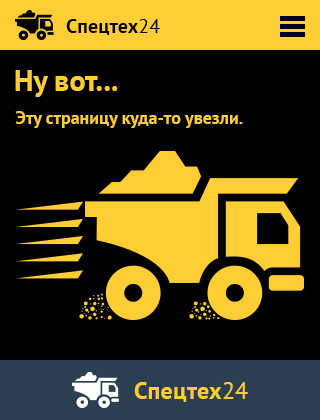
<style>
.page{position:relative;width:320px;height:420px;background:#000000}
.page>*{position:absolute;margin:0}
.t1{font:20px "PTSans-Bold";letter-spacing:0.01em;color:#000000}
.t2{font:20px "PTSans-Regular";letter-spacing:0.01em;color:#000000}
.t3{font:30px "PTSans-Bold";color:#ffcd34}
.t4{font:18px "PTSans-Bold";color:#ffcd34}
.t5{font:24px "PTSans-Bold";letter-spacing:0.01em;color:#ffcd34}
.t6{font:24px "PTSans-Regular";letter-spacing:0.01em;color:#ffcd34}
</style>
<div class="page">
<p class="t1" style="left:66px;top:19px;width:94px;height:16px">Спецтех<span class="t2">24</span></p>
<p class="t3" style="left:15px;top:70px;width:103px;height:27px">Ну вот...</p>
<p class="t4" style="left:15px;top:111px;width:228px;height:17px">Эту страницу куда-то увезли.</p>
<p class="t5" style="left:134px;top:382px;width:114px;height:20px">Спецтех<span class="t6">24</span></p>
</div>
